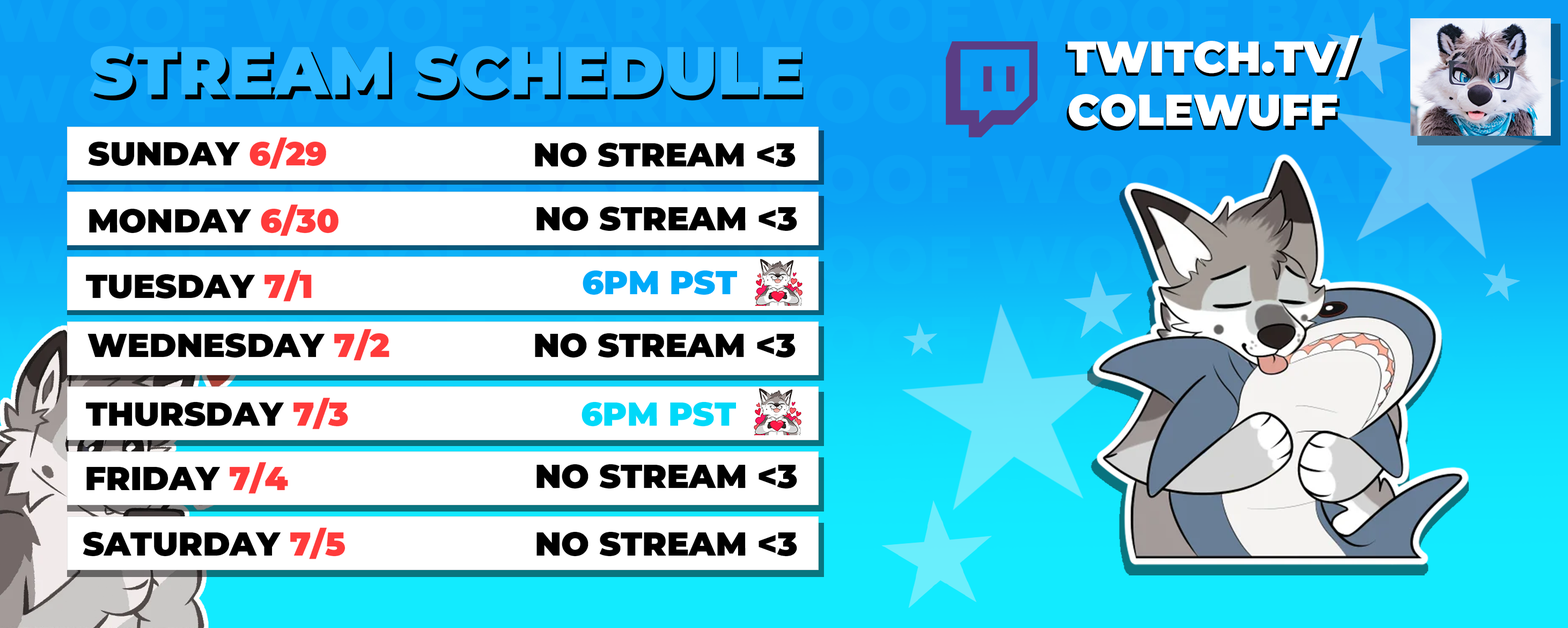
<style>
.page{position:relative;width:1568px;height:628px;background:#ffffff}
.page>*{position:absolute;margin:0}
.t1{font:44.8px "Montserrat-Black";color:#ffffff;text-transform:uppercase}
.t2{font:44px "Montserrat-Black";color:#ffffff;text-transform:uppercase}
.t3{font:67.8px "Montserrat-Black";color:#2fb8ff;text-transform:uppercase}
.t4{font:32.9px "Montserrat-Black";color:#000000;text-transform:uppercase}
.t5{font:32.9px "Montserrat-Black";color:#ff3b3b;text-transform:uppercase}
.t6{font:32.9px "Montserrat-Black";color:#00aaf9;text-transform:uppercase}
.t7{font:32.9px "Montserrat-Black";color:#00d9f9;text-transform:uppercase}
</style>
<div class="page">
<p class="t1" style="left:1065px;top:38px;width:298px;height:93px">TWITCH.TV/<br>COLEWUFF</p>
<p class="t2" style="left:1068px;top:35px;width:291px;height:92px">TWITCH.TV/<br>COLEWUFF</p>
<p class="t3" style="left:90px;top:46px;width:713px;height:50px">Stream Schedule</p>
<p class="t4" style="left:88px;top:137px;width:238px;height:32px">Sunday <span class="t5">6/29</span></p>
<p class="t4" style="left:535px;top:142px;width:261px;height:25px">NO STREAM &lt;3</p>
<p class="t4" style="left:89px;top:204px;width:249px;height:32px">Monday <span class="t5">6/30</span></p>
<p class="t4" style="left:536px;top:206px;width:261px;height:25px">NO STREAM &lt;3</p>
<p class="t4" style="left:86px;top:270px;width:226px;height:31px">Tuesday <span class="t5">7/1</span></p>
<p class="t6" style="left:583px;top:270px;width:154px;height:25px">6pm PST</p>
<p class="t4" style="left:87px;top:329px;width:302px;height:31px">wednesday <span class="t5">7/2</span></p>
<p class="t4" style="left:535px;top:333px;width:261px;height:25px">NO STREAM &lt;3</p>
<p class="t4" style="left:86px;top:397px;width:262px;height:32px">thursday <span class="t5">7/3</span></p>
<p class="t7" style="left:581px;top:401px;width:155px;height:25px">6pm PST</p>
<p class="t4" style="left:86px;top:462px;width:202px;height:32px">friday <span class="t5">7/4</span></p>
<p class="t4" style="left:536px;top:463px;width:261px;height:26px">NO STREAM &lt;3</p>
<p class="t4" style="left:83px;top:527px;width:262px;height:32px">saturday <span class="t5">7/5</span></p>
<p class="t4" style="left:536px;top:531px;width:261px;height:25px">NO STREAM &lt;3</p>
</div>
